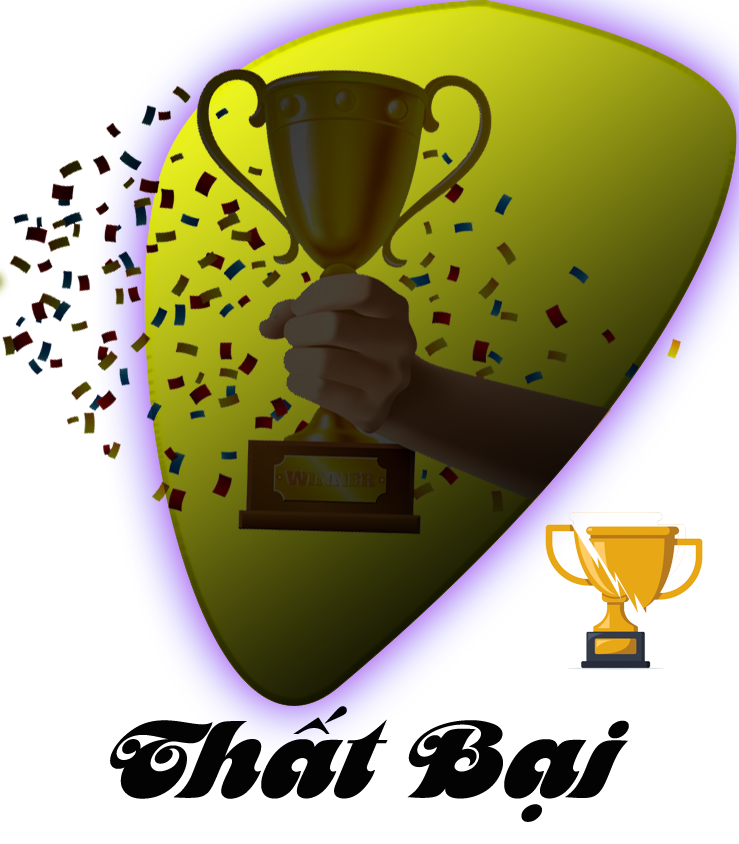
<style>
.page{position:relative;width:739px;height:844px;background:#ffffff}
.page>*{position:absolute;margin:0}
.t1{font:114.8px "UTM-Mother";color:#000000}
</style>
<div class="page">
<p class="t1" style="left:110px;top:706px;width:519px;height:116px">Thất Bại</p>
</div>
